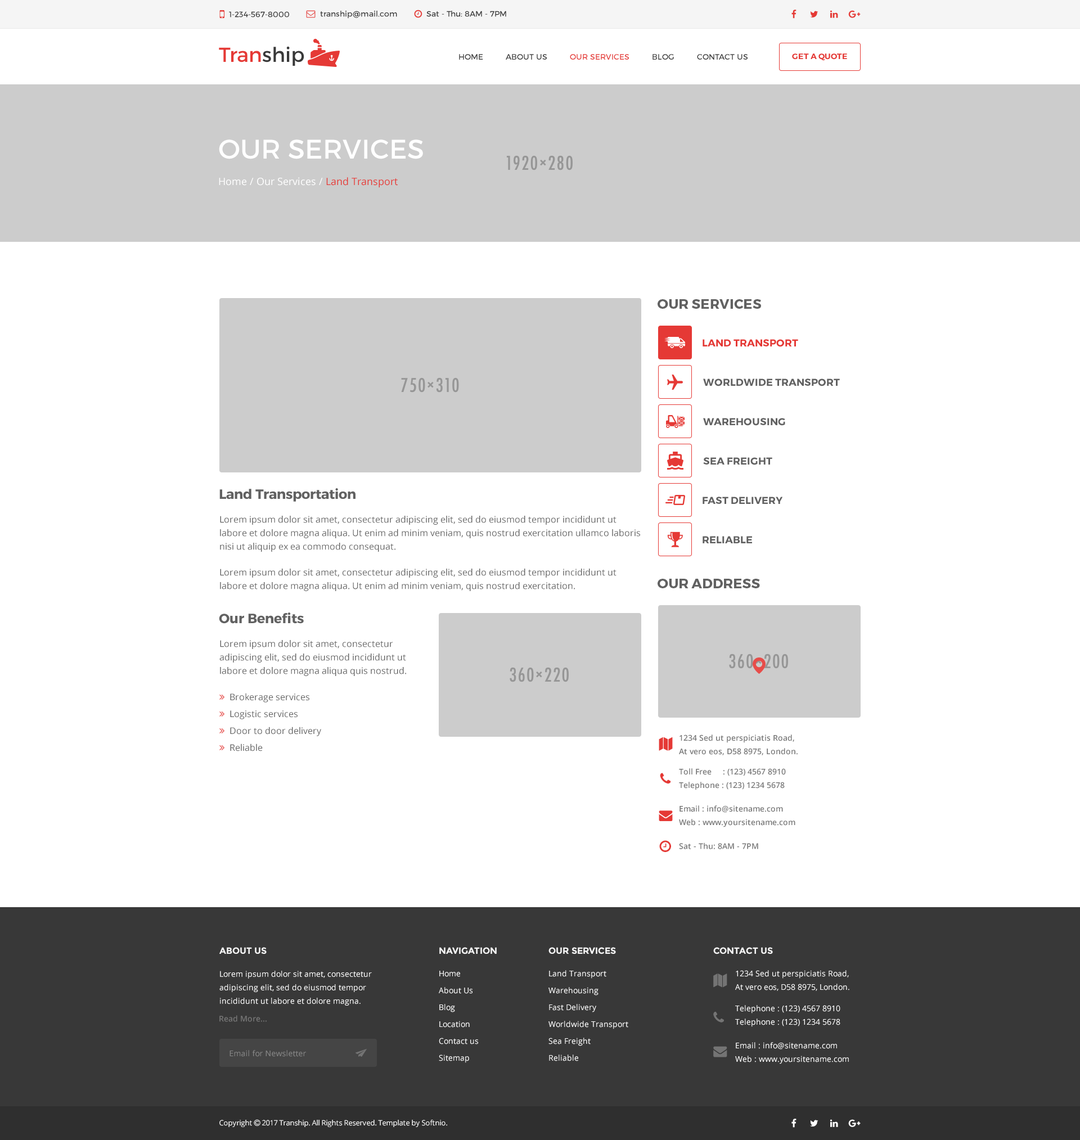
<style>
.page{position:relative;width:1080px;height:1140px;background:#ffffff}
.page>*{position:absolute;margin:0}
.t1{font:7.9px "Montserrat-Regular";color:#383838}
.t2{font:20.2px "Montserrat-Regular";color:#e53935}
.t3{font:20.2px "Montserrat-Regular";color:#383838}
.t4{font:7.9px "Montserrat-Regular";color:#383838;text-transform:uppercase}
.t5{font:7.9px "Montserrat-Regular";color:#e53935;text-transform:uppercase}
.t6{font:7.9px "Montserrat-Bold";color:#e53935;text-transform:uppercase}
.t7{font:27px "Montserrat-Regular";color:#ffffff;text-transform:uppercase}
.t8{font:10.1px "OpenSans";color:#ffffff}
.t9{font:10.1px "OpenSans";color:#e53935}
.t10{font:13.5px "Montserrat-Bold";color:#616161;text-transform:uppercase}
.t11{font:10.1px "Montserrat-Bold";color:#e53935;text-transform:uppercase}
.t12{font:10.1px "Montserrat-Bold";color:#616161;text-transform:uppercase}
.t13{font:13.5px "Montserrat-Bold";color:#616161}
.t14{font:9px/13.5px "OpenSans";color:#616161}
.t15{font:9px/16.9px "OpenSans";color:#616161}
.t16{font:7.9px/13.5px "OpenSans-Semibold";color:#777777}
.t17{font:7.9px "OpenSans-Semibold";color:#777777}
.t18{font:9px "Montserrat-Bold";color:#f4f4f4;text-transform:uppercase}
.t19{font:7.9px/13.5px "OpenSans";color:#ffffff}
.t20{font:7.9px/16.9px "OpenSans";color:#ffffff}
.t21{font:7.9px "OpenSans-Semibold";color:#747474}
.t22{font:7.9px "OpenSans";color:#888888}
</style>
<div class="page">
<p class="t1" style="left:229px;top:11px;width:60px;height:6px">1-234-567-8000</p>
<p class="t1" style="left:320px;top:11px;width:77px;height:8px">tranship@mail.com</p>
<p class="t1" style="left:426px;top:11px;width:80px;height:6px">Sat - Thu: 8AM - 7PM</p>
<p class="t2" style="left:219px;top:46px;width:85px;height:20px">Tran<span class="t3">ship</span></p>
<p class="t4" style="left:459px;top:54px;width:289px;height:6px">Home          About Us          <span class="t5">Our Services</span>          blog          contact us</p>
<p class="t6" style="left:792px;top:53px;width:55px;height:8px">get a quote</p>
<p class="t7" style="left:219px;top:140px;width:204px;height:19px">our services</p>
<p class="t8" style="left:219px;top:177px;width:179px;height:11px">Home / Our Services / <span class="t9">Land Transport</span></p>
<p class="t10" style="left:658px;top:299px;width:103px;height:10px">Our services</p>
<p class="t11" style="left:703px;top:339px;width:95px;height:8px">Land Transport</p>
<p class="t12" style="left:703px;top:379px;width:137px;height:7px">Worldwide Transport</p>
<p class="t12" style="left:703px;top:418px;width:82px;height:8px">Warehousing</p>
<p class="t12" style="left:703px;top:457px;width:69px;height:8px">Sea Freight</p>
<p class="t13" style="left:219px;top:488px;width:137px;height:14px">Land Transportation</p>
<p class="t12" style="left:703px;top:497px;width:80px;height:7px">Fast Delivery</p>
<p class="t14" style="left:220px;top:516px;width:420px;height:36px">Lorem ipsum dolor sit amet, consectetur adipiscing elit, sed do eiusmod tempor incididunt ut labore et dolore magna aliqua. Ut enim ad minim veniam, quis nostrud exercitation ullamco laboris nisi ut aliquip ex ea commodo consequat.</p>
<p class="t12" style="left:703px;top:536px;width:49px;height:7px">Reliable</p>
<p class="t14" style="left:220px;top:569px;width:396px;height:22px">Lorem ipsum dolor sit amet, consectetur adipiscing elit, sed do eiusmod tempor incididunt ut labore et dolore magna aliqua. Ut enim ad minim veniam, quis nostrud exercitation. ullamconaliquip ex ea commodo consequat.</p>
<p class="t10" style="left:658px;top:579px;width:102px;height:9px">Our Address</p>
<p class="t13" style="left:219px;top:613px;width:85px;height:11px">Our Benefits</p>
<p class="t14" style="left:219px;top:640px;width:187px;height:36px">Lorem ipsum dolor sit amet, consectetur adipiscing elit, sed do eiusmod incididunt ut labore et dolore magna aliqua quis nostrud. exercitation. ullamconaliquip ex ea commodo consequat.</p>
<p class="t15" style="left:230px;top:693px;width:91px;height:59px">Brokerage services<br>Logistic services<br>Door to door delivery<br>Reliable</p>
<p class="t16" style="left:679px;top:735px;width:119px;height:20px">1234 Sed ut perspiciatis Road,<br>At vero eos, D58 8975, London.</p>
<p class="t16" style="left:679px;top:768px;width:107px;height:22px">Toll Free     : (123) 4567 8910<br>Telephone : (123) 1234 5678</p>
<p class="t16" style="left:679px;top:806px;width:116px;height:21px">Email : info@sitename.com<br>Web : www.yoursitename.com</p>
<p class="t17" style="left:679px;top:843px;width:79px;height:6px">Sat - Thu: 8AM - 7PM</p>
<p class="t18" style="left:219px;top:947px;width:48px;height:8px">about us</p>
<p class="t18" style="left:439px;top:947px;width:58px;height:8px">navigation</p>
<p class="t18" style="left:548px;top:947px;width:68px;height:8px">our services</p>
<p class="t18" style="left:713px;top:947px;width:60px;height:8px">contact us</p>
<p class="t19" style="left:219px;top:971px;width:153px;height:35px">Lorem ipsum dolor sit amet, consectetur adipiscing elit, sed do eiusmod tempor incididunt ut labore et dolore magna.</p>
<p class="t20" style="left:439px;top:971px;width:39px;height:92px">Home<br>About Us<br>Blog<br>Location<br>Contact us<br>Sitemap</p>
<p class="t20" style="left:548px;top:970px;width:80px;height:91px">Land Transport<br>Warehousing<br>Fast Delivery <br>Worldwide Transport<br>Sea Freight<br>Reliable</p>
<p class="t19" style="left:735px;top:970px;width:114px;height:21px">1234 Sed ut perspiciatis Road,<br>At vero eos, D58 8975, London.</p>
<p class="t19" style="left:735px;top:1005px;width:105px;height:22px">Telephone : (123) 4567 8910<br>Telephone : (123) 1234 5678</p>
<p class="t21" style="left:219px;top:1015px;width:48px;height:7px">Read More...</p>
<p class="t19" style="left:735px;top:1042px;width:114px;height:22px">Email : info@sitename.com<br>Web : www.yoursitename.com</p>
<p class="t22" style="left:230px;top:1050px;width:76px;height:7px">Email for Newsletter</p>
</div>
